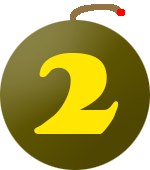
<style>
.page{position:relative;width:150px;height:170px;background:#ffffff}
.page>*{position:absolute;margin:0}
.t1{font:108.3px "GoudyStout";color:#ffe603}
</style>
<div class="page">
<p class="t1" style="left:34px;top:53px;width:85px;height:81px">2</p>
</div>
